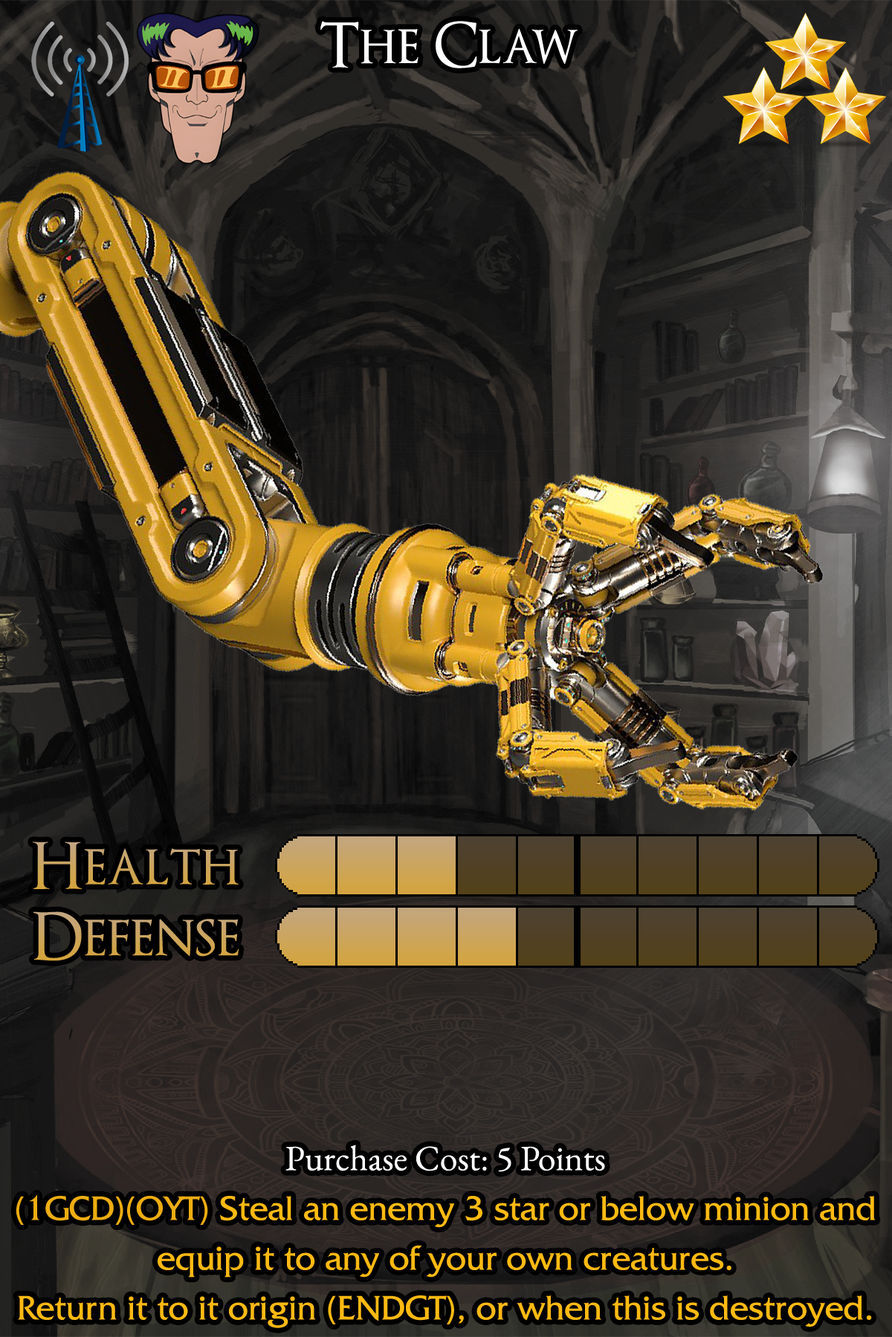
<style>
.page{position:relative;width:892px;height:1337px}
.page>*{position:absolute;margin:0}
.t1{font:104.8px "OptimusPrinceps";color:#ffffff}
.t2{font:109.2px "OptimusPrinceps"}
.t3{font:110.7px "OptimusPrinceps"}
.t4{font:60.9px/49.8px "FrizQuadrataStd";color:#ffba12}
.t5{font:60.9px/49.8px "EBGaramond-Regular";color:#ffffff}
.t6{font:60.9px/49.8px "FrizQuadrataStd";color:#edad11}
</style>
<div class="page">
<p class="t1" style="left:320px;top:21px;width:257px;height:47px">The Claw</p>
<p class="t2" style="left:33px;top:842px;width:206px;height:47px">Health</p>
<p class="t3" style="left:33px;top:912px;width:206px;height:49px">Defense</p>
<p class="t4" style="left:16px;top:1145px;width:859px;height:183px;text-align:center"><span class="t5">Purchase Cost: 5 Points<br></span><span class="t6">(1GCD)(OYT) </span>Steal an enemy 3 star or below minion and equip it to any of your own creatures. <br>Return it to it origin (ENDGT), or when this is destroyed.</p>
</div>
